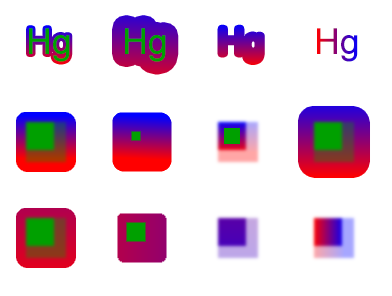
<style>
.page{position:relative;width:392px;height:296px;background:#ffffff}
.page>*{position:absolute;margin:0}
.t1{font:36px "ArialMT";color:#00a000}
.t2{font:36px "ArialMT"}
</style>
<div class="page">
<p class="t1" style="left:29px;top:28px;width:41px;height:34px">Hg</p>
<p class="t1" style="left:125px;top:28px;width:41px;height:34px">Hg</p>
<p class="t2" style="left:221px;top:28px;width:41px;height:34px">Hg</p>
<p class="t2" style="left:317px;top:28px;width:41px;height:34px">Hg</p>
</div>
